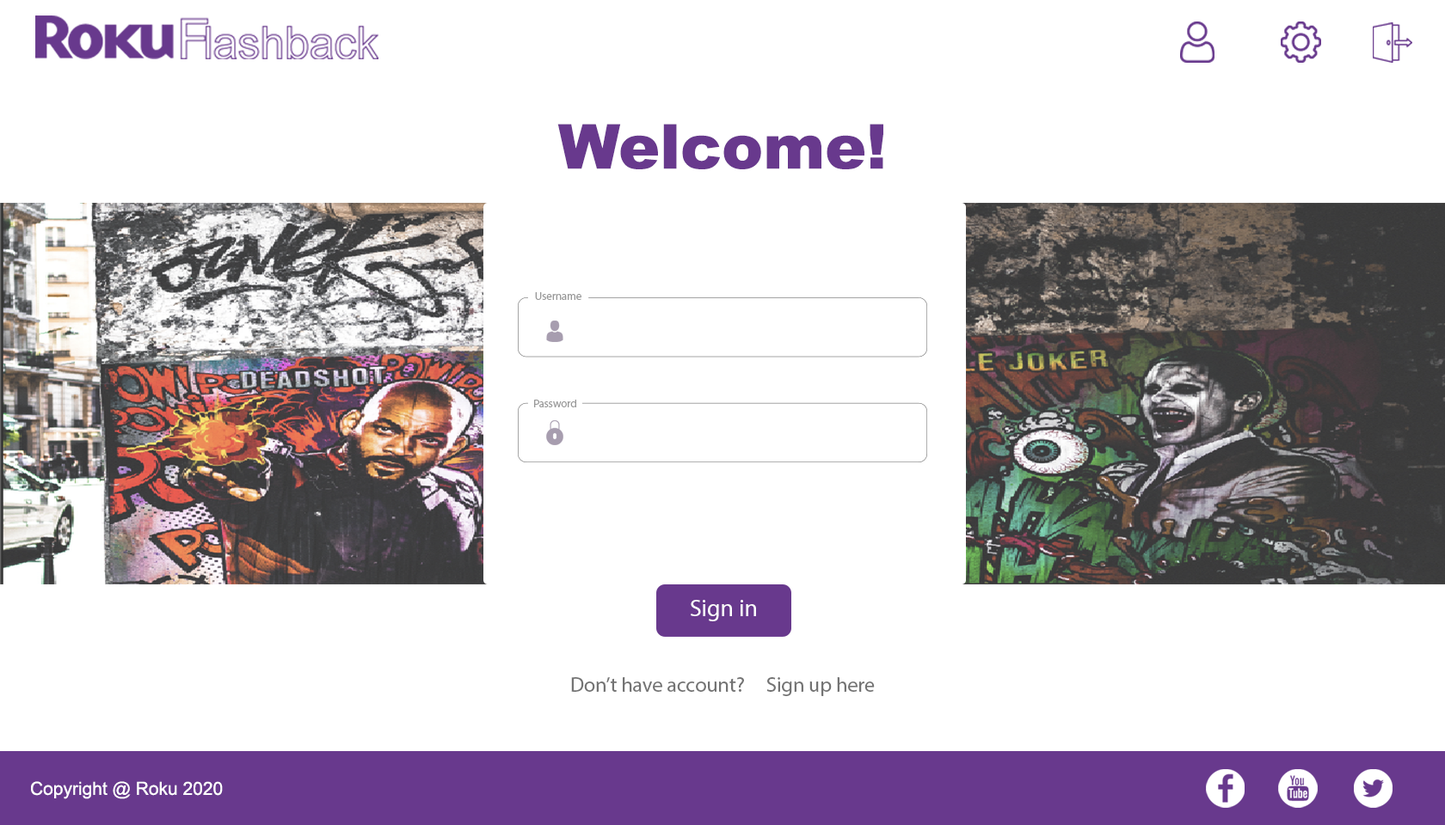
<style>
.page{position:relative;width:1445px;height:825px;background:#ffffff}
.page>*{position:absolute;margin:0}
.t1{font:61.9px "Arial-Black";color:#68398d}
.t2{font:11.3px "MyriadPro-Regular";letter-spacing:-0.01em;color:#989898}
.t3{font:11px "MyriadPro-Regular";letter-spacing:-0.01em;color:#989898}
.t4{font:24px "MyriadPro-Regular";color:#ffffff}
.t5{font:20.6px "MyriadPro-Regular";color:#737373}
.t6{font:18px "ArialMT";color:#ffffff}
</style>
<div class="page">
<p class="t1" style="left:557px;top:124px;width:326px;height:45px">Welcome!</p>
<p class="t2" style="left:535px;top:292px;width:46px;height:8px">Username</p>
<p class="t3" style="left:534px;top:400px;width:42px;height:8px">Password</p>
<p class="t4" style="left:690px;top:600px;width:66px;height:22px">Sign in</p>
<p class="t5" style="left:571px;top:678px;width:303px;height:18px">Don’t have account?     Sign up here</p>
<p class="t6" style="left:31px;top:782px;width:192px;height:18px">Copyright @ Roku 2020</p>
</div>
